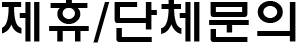
<style>
.page{position:relative;width:299px;height:50px;background:#ffffff}
.page>*{position:absolute;margin:0}
.t1{font:48px "H2wulM";color:#000000}
</style>
<div class="page">
<p class="t1" style="left:2px;top:0px;width:294px;height:43px">제휴/단체문의</p>
</div>
